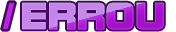
<style>
.page{position:relative;width:176px;height:32px}
.page>*{position:absolute;margin:0}
.t1{font:41.3px "DFSoGeiStd-W9";letter-spacing:-0.03em;font-weight:bold;scale:0.96 1}
</style>
<div class="page">
<p class="t1" style="left:22px;top:2px;width:142px;height:28px">ERROU</p>
</div>
